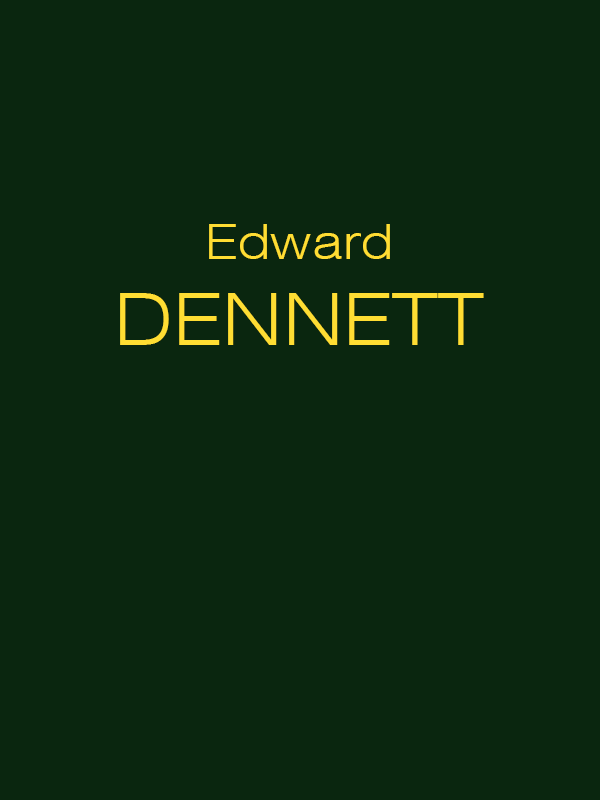
<style>
.page{position:relative;width:600px;height:800px;background:#0a260f}
.page>*{position:absolute;margin:0}
.t1{font:72px "Swiss721BT-LightExtended";color:#ffdd33}
.t2{font:48px "Swiss721BT-LightExtended";color:#ffdd33}
</style>
<div class="page">
<p class="t1" style="left:120px;top:224px;width:364px;height:121px;text-align:center"><span class="t2">Edward<br></span>DENNETT</p>
</div>
